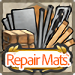
<style>
.page{position:relative;width:75px;height:75px}
.page>*{position:absolute;margin:0}
.t1{font:16px "AdobeClean-SemiCn";letter-spacing:-0.08em;color:#ff5a00}
</style>
<div class="page">
<p class="t1" style="left:7px;top:54px;width:63px;height:15px">Repair Mats.</p>
</div>
